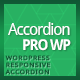
<style>
.page{position:relative;width:80px;height:80px;background:#28b162}
.page>*{position:absolute;margin:0}
.t1{font:16px "DroidSans";letter-spacing:-0.075em;color:#ffffff}
.t2{font:15px "DroidSans-Bold";letter-spacing:-0.075em;color:#ffffff;scale:0.96 1}
.t3{font:6px/7px "DroidSans";letter-spacing:0.08em;color:#105834;scale:1.18 1}
</style>
<div class="page">
<p class="t1" style="left:8px;top:22px;width:62px;height:13px">Accordion</p>
<p class="t2" style="left:23px;top:39px;width:48px;height:12px">PRO WP</p>
<p class="t3" style="left:5px;top:55px;width:45px;height:20px">WORDPRESS<br>RESPONSIVE<br>ACCORDION</p>
</div>
